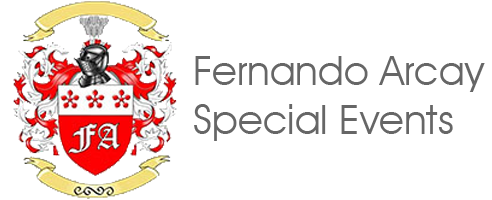
<style>
.page{position:relative;width:492px;height:200px;background:#ffffff}
.page>*{position:absolute;margin:0}
.t1{font:40.7px "AvantGardeITCbyBT-Book";color:#666666}
</style>
<div class="page">
<p class="t1" style="left:194px;top:56px;width:291px;height:85px">Fernando Arcay<br>Special Events</p>
</div>
